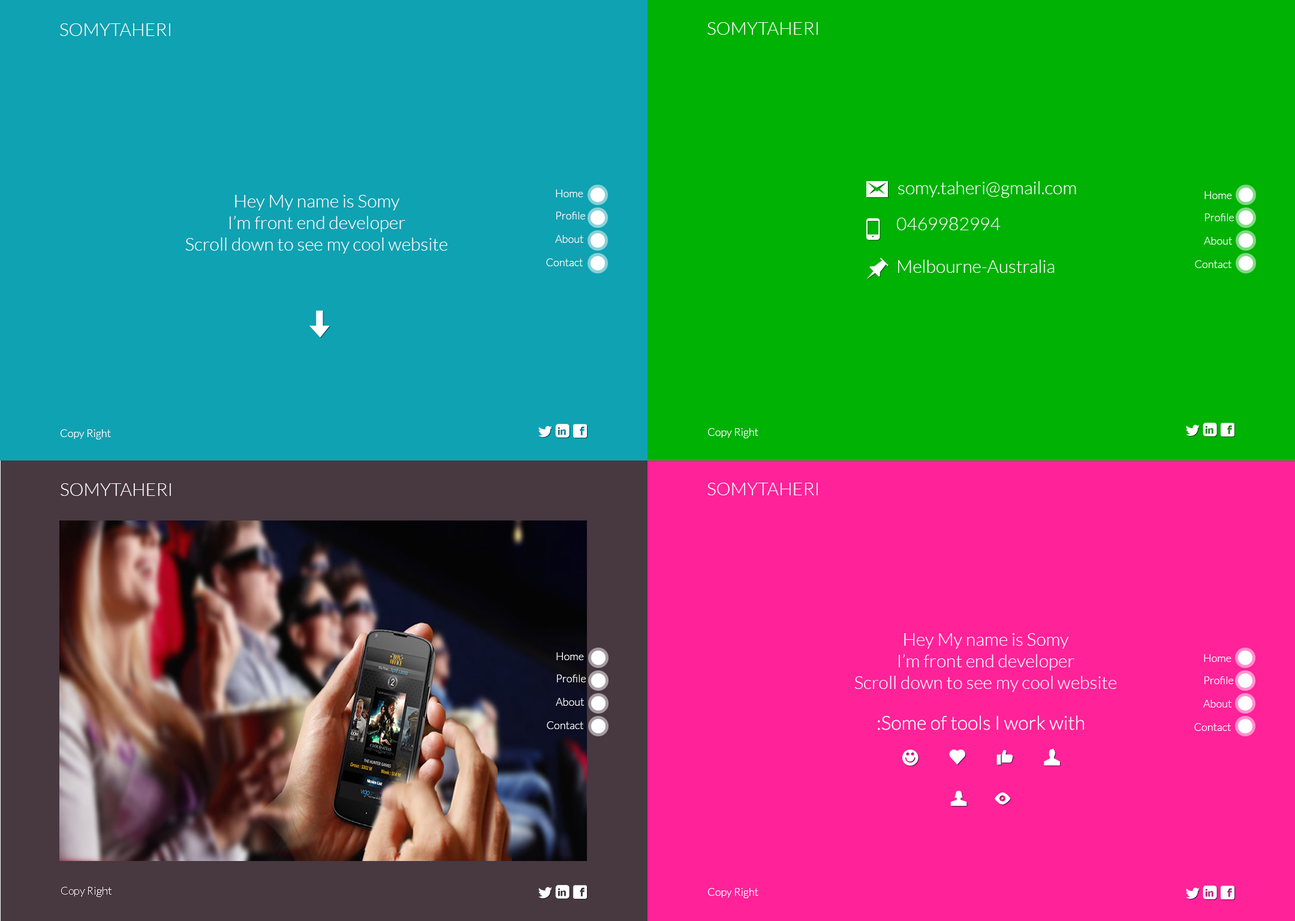
<style>
.page{position:relative;width:1295px;height:921px;background:#00b204}
.page>*{position:absolute;margin:0}
.t1{font:18px "Lato-Light";color:#ffffff}
.t2{font:10.8px "Lato-Light";color:#ffffff}
.t3{font:19.2px "Lato-Light";color:#ffffff}
</style>
<div class="page">
<p class="t1" style="left:60px;top:23px;width:110px;height:13px">SOMYTAHERI</p>
<p class="t1" style="left:707px;top:22px;width:111px;height:13px">SOMYTAHERI</p>
<p class="t1" style="left:898px;top:181px;width:178px;height:17px">somy.taheri@gmail.com</p>
<p class="t1" style="left:185px;top:195px;width:262px;height:59px;text-align:center">Hey My name is Somy<br>I’m front end developer<br>Scroll down to see my cool website</p>
<p class="t2" style="left:556px;top:189px;width:27px;height:8px">Home</p>
<p class="t2" style="left:1204px;top:191px;width:28px;height:8px">Home</p>
<p class="t2" style="left:556px;top:212px;width:29px;height:7px">Profile</p>
<p class="t1" style="left:897px;top:217px;width:104px;height:13px">0469982994</p>
<p class="t2" style="left:1205px;top:213px;width:29px;height:8px">Profile</p>
<p class="t2" style="left:555px;top:235px;width:28px;height:8px">About</p>
<p class="t2" style="left:1204px;top:237px;width:28px;height:8px">About</p>
<p class="t2" style="left:546px;top:258px;width:37px;height:8px">Contact</p>
<p class="t1" style="left:898px;top:260px;width:157px;height:13px">Melbourne-Australia</p>
<p class="t2" style="left:1195px;top:260px;width:36px;height:8px">Contact</p>
<p class="t2" style="left:60px;top:429px;width:51px;height:10px">Copy Right</p>
<p class="t2" style="left:707px;top:428px;width:51px;height:10px">Copy Right</p>
<p class="t1" style="left:61px;top:483px;width:110px;height:13px">SOMYTAHERI</p>
<p class="t1" style="left:707px;top:483px;width:111px;height:12px">SOMYTAHERI</p>
<p class="t1" style="left:854px;top:633px;width:262px;height:59px;text-align:center">Hey My name is Somy<br>I’m front end developer<br>Scroll down to see my cool website</p>
<p class="t2" style="left:556px;top:652px;width:28px;height:8px">Home</p>
<p class="t2" style="left:1204px;top:654px;width:27px;height:8px">Home</p>
<p class="t2" style="left:557px;top:674px;width:29px;height:8px">Profile</p>
<p class="t2" style="left:1204px;top:676px;width:29px;height:8px">Profile</p>
<p class="t2" style="left:556px;top:698px;width:28px;height:8px">About</p>
<p class="t2" style="left:1203px;top:700px;width:28px;height:7px">About</p>
<p class="t2" style="left:547px;top:721px;width:36px;height:8px">Contact</p>
<p class="t3" style="left:878px;top:715px;width:206px;height:15px">Some of tools I work with:</p>
<p class="t2" style="left:1194px;top:723px;width:37px;height:8px">Contact</p>
<p class="t2" style="left:61px;top:887px;width:51px;height:10px">Copy Right</p>
<p class="t2" style="left:707px;top:888px;width:51px;height:10px">Copy Right</p>
</div>
